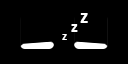
<style>
.page{position:relative;width:128px;height:64px;background:#000000}
.page>*{position:absolute;margin:0}
.t1{font:20.8px "Calibri-Bold";color:#ffffff}
.t2{font:16.7px "Calibri-Bold";color:#ffffff}
.t3{font:12.5px "Calibri-Bold";color:#ffffff}
</style>
<div class="page">
<p class="t1" style="left:80px;top:13px;width:8px;height:10px">z</p>
<p class="t2" style="left:71px;top:24px;width:7px;height:8px">z</p>
<p class="t3" style="left:62px;top:34px;width:5px;height:6px">z</p>
</div>
